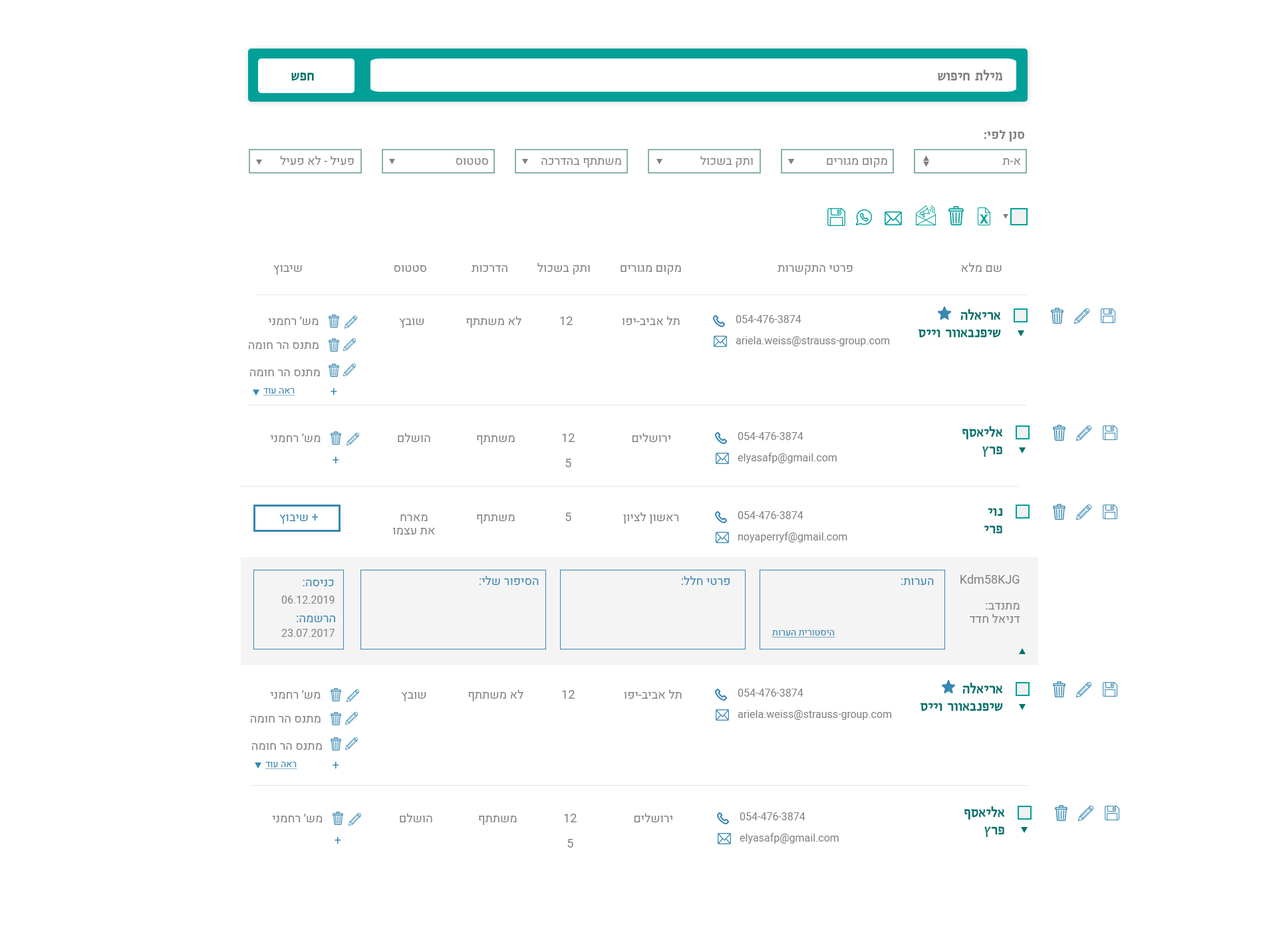
<style>
.page{position:relative;width:1277px;height:934px;background:#ffffff}
.page>*{position:absolute;margin:0}
.t1{font:14.6px "ArbelMF-Bold";color:#00736d;text-transform:uppercase}
.t2{font:14.6px "ArbelMF-Bold";color:#818181;text-transform:uppercase}
.t3{font:12px "Heebo-Bold";color:#818181}
.t4{font:12px "Heebo-Regular";color:#818181}
.t5{font:11.9px "Heebo-Regular";color:#818181}
.t6{font:10.6px "Heebo-Regular";color:#818181}
.t7{font:9.3px "Heebo-Regular";color:#3787b1;text-decoration:underline}
.t8{font:11.9px "Heebo-Regular";color:#3787b1}
.t9{font:11.9px/13.9px "Heebo-Regular";color:#818181}
.t10{font:11.9px "Heebo-Regular";color:#3887b1}
.t11{font:9.4px "Heebo-Regular";color:#3787b1;text-decoration:underline}
</style>
<div class="page">
<p class="t1" style="left:291px;top:72px;width:23px;height:9px">חפש</p>
<p class="t2" style="left:937px;top:69px;width:65px;height:12px">מילת חיפוש</p>
<p class="t3" style="left:983px;top:130px;width:41px;height:12px">סנן לפי:</p>
<p class="t4" style="left:280px;top:156px;width:74px;height:9px">פעיל - לא פעיל</p>
<p class="t4" style="left:455px;top:158px;width:33px;height:7px">סטטוס</p>
<p class="t4" style="left:541px;top:158px;width:80px;height:10px">משתתף בהדרכה</p>
<p class="t4" style="left:700px;top:156px;width:53px;height:12px">ותק בשכול</p>
<p class="t4" style="left:826px;top:158px;width:61px;height:10px">מקום מגורים</p>
<p class="t4" style="left:1002px;top:158px;width:19px;height:7px">א-ת</p>
<p class="t4" style="left:273px;top:265px;width:29px;height:10px">שיבוץ</p>
<p class="t4" style="left:394px;top:265px;width:32px;height:7px">סטטוס</p>
<p class="t4" style="left:471px;top:265px;width:36px;height:7px">הדרכות</p>
<p class="t4" style="left:537px;top:263px;width:53px;height:12px">ותק בשכול</p>
<p class="t4" style="left:620px;top:265px;width:61px;height:10px">מקום מגורים</p>
<p class="t4" style="left:777px;top:265px;width:75px;height:10px">פרטי התקשרות</p>
<p class="t4" style="left:961px;top:263px;width:40px;height:9px">שם מלא</p>
<p class="t5" style="left:268px;top:316px;width:50px;height:9px">מש׳ רחמני</p>
<p class="t5" style="left:466px;top:316px;width:55px;height:12px">לא משתתף</p>
<p class="t5" style="left:560px;top:316px;width:12px;height:9px">12</p>
<p class="t5" style="left:622px;top:316px;width:57px;height:9px">תל אביב-יפו</p>
<p class="t6" style="left:735px;top:315px;width:66px;height:8px">054-476-3874</p>
<p class="t1" style="left:918px;top:308px;width:83px;height:30px">אריאלה <br>שיפנבאוור וייס</p>
<p class="t5" style="left:399px;top:318px;width:25px;height:10px">שובץ</p>
<p class="t6" style="left:735px;top:336px;width:155px;height:10px">ariela.weiss@strauss-group.com</p>
<p class="t5" style="left:248px;top:342px;width:70px;height:7px">מתנס הר חומה</p>
<p class="t5" style="left:249px;top:370px;width:71px;height:6px">מתנס הר חומה</p>
<p class="t7" style="left:263px;top:388px;width:32px;height:8px">ראה עוד</p>
<p class="t8" style="left:330px;top:388px;width:7px;height:7px">+</p>
<p class="t1" style="left:962px;top:426px;width:41px;height:31px">אליאסף<br>פרץ</p>
<p class="t5" style="left:270px;top:433px;width:50px;height:9px">מש׳ רחמני</p>
<p class="t5" style="left:398px;top:433px;width:32px;height:9px">הושלם</p>
<p class="t5" style="left:476px;top:435px;width:39px;height:10px">משתתף</p>
<p class="t5" style="left:562px;top:433px;width:12px;height:9px">12</p>
<p class="t5" style="left:632px;top:433px;width:38px;height:9px">ירושלים</p>
<p class="t6" style="left:737px;top:432px;width:66px;height:8px">054-476-3874</p>
<p class="t8" style="left:332px;top:457px;width:7px;height:6px">+</p>
<p class="t5" style="left:565px;top:459px;width:6px;height:8px">5</p>
<p class="t6" style="left:737px;top:453px;width:99px;height:10px">elyasafp@gmail.com</p>
<p class="t1" style="left:984px;top:508px;width:18px;height:26px">נוי<br>פרי</p>
<p class="t8" style="left:279px;top:514px;width:39px;height:10px">+ שיבוץ</p>
<p class="t9" style="left:393px;top:515px;width:42px;height:20px;text-align:center">מארח <br>את עצמו</p>
<p class="t5" style="left:476px;top:515px;width:39px;height:9px">משתתף</p>
<p class="t5" style="left:565px;top:513px;width:6px;height:8px">5</p>
<p class="t5" style="left:623px;top:512px;width:56px;height:12px">ראשון לציון</p>
<p class="t6" style="left:737px;top:511px;width:66px;height:8px">054-476-3874</p>
<p class="t6" style="left:738px;top:532px;width:109px;height:11px">noyaperryf@gmail.com</p>
<p class="t10" style="left:303px;top:580px;width:31px;height:6px">כניסה:</p>
<p class="t10" style="left:479px;top:576px;width:60px;height:9px">הסיפור שלי:</p>
<p class="t10" style="left:681px;top:576px;width:49px;height:9px">פרטי חלל:</p>
<p class="t10" style="left:900px;top:578px;width:33px;height:7px">הערות:</p>
<p class="t5" style="left:960px;top:574px;width:59px;height:10px">Kdm58KJGfDYAjzASnRDXY9bpHKy1</p>
<p class="t6" style="left:281px;top:596px;width:53px;height:8px">06.12.2019</p>
<p class="t9" style="left:969px;top:603px;width:51px;height:20px">מתנדב:<br>דניאל חדד</p>
<p class="t10" style="left:297px;top:616px;width:38px;height:6px">הרשמה:</p>
<p class="t6" style="left:281px;top:629px;width:53px;height:8px">23.07.2017</p>
<p class="t11" style="left:771px;top:630px;width:63px;height:8px">היסטורית הערות</p>
<p class="t5" style="left:468px;top:689px;width:55px;height:12px">לא משתתף</p>
<p class="t5" style="left:624px;top:689px;width:57px;height:10px">תל אביב-יפו</p>
<p class="t6" style="left:737px;top:689px;width:66px;height:8px">054-476-3874</p>
<p class="t1" style="left:919px;top:682px;width:84px;height:29px">אריאלה <br>שיפנבאוור וייס</p>
<p class="t5" style="left:270px;top:690px;width:50px;height:9px">מש׳ רחמני</p>
<p class="t5" style="left:401px;top:692px;width:25px;height:9px">שובץ</p>
<p class="t5" style="left:562px;top:690px;width:12px;height:9px">12</p>
<p class="t6" style="left:737px;top:710px;width:155px;height:10px">ariela.weiss@strauss-group.com</p>
<p class="t5" style="left:250px;top:716px;width:70px;height:7px">מתנס הר חומה</p>
<p class="t5" style="left:251px;top:743px;width:71px;height:7px">מתנס הר חומה</p>
<p class="t7" style="left:265px;top:762px;width:32px;height:7px">ראה עוד</p>
<p class="t8" style="left:332px;top:762px;width:7px;height:7px">+</p>
<p class="t1" style="left:964px;top:806px;width:41px;height:32px">אליאסף<br>פרץ</p>
<p class="t5" style="left:272px;top:814px;width:50px;height:8px">מש׳ רחמני</p>
<p class="t5" style="left:400px;top:813px;width:32px;height:9px">הושלם</p>
<p class="t5" style="left:478px;top:816px;width:39px;height:9px">משתתף</p>
<p class="t5" style="left:564px;top:814px;width:12px;height:8px">12</p>
<p class="t5" style="left:634px;top:813px;width:38px;height:9px">ירושלים</p>
<p class="t6" style="left:739px;top:812px;width:66px;height:8px">054-476-3874</p>
<p class="t6" style="left:739px;top:833px;width:99px;height:11px">elyasafp@gmail.com</p>
<p class="t8" style="left:334px;top:837px;width:7px;height:7px">+</p>
<p class="t5" style="left:567px;top:839px;width:6px;height:9px">5</p>
</div>
